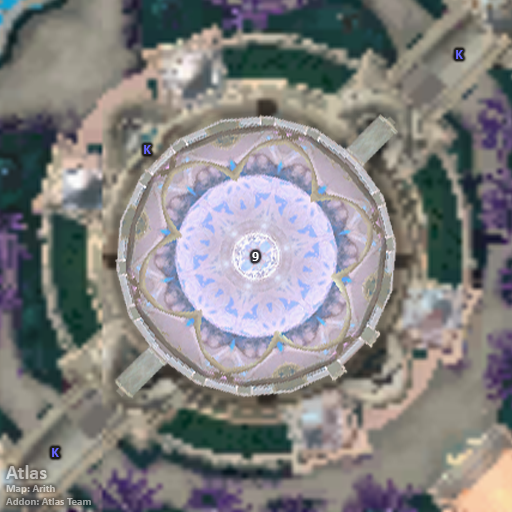
<style>
.page{position:relative;width:512px;height:512px}
.page>*{position:absolute;margin:0}
.t1{font:14px "Calibri-Bold";color:#6666ff}
.t2{font:14px "Calibri-Bold";color:#ffffff}
.t3{font:11px "Calibri-Bold";color:#c1bdb7}
.t4{font:20px "Calibri-Bold";color:#c1bdb7}
</style>
<div class="page">
<p class="t1" style="left:456px;top:50px;width:7px;height:9px">K</p>
<p class="t1" style="left:144px;top:145px;width:7px;height:9px">K</p>
<p class="t2" style="left:252px;top:252px;width:7px;height:9px">9</p>
<p class="t1" style="left:52px;top:448px;width:7px;height:9px">K</p>
<p class="t3" style="left:6px;top:465px;width:85px;height:40px"><span class="t4">Atlas<br></span>Map: Arith<br>Addon: Atlas Team</p>
</div>
